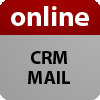
<style>
.page{position:relative;width:100px;height:100px}
.page>*{position:absolute;margin:0}
.t1{font:28.1px "MyriadPro-Bold";color:#ffffff}
.t2{font:18.7px/20px "MyriadPro-Bold";color:#000000}
</style>
<div class="page">
<p class="t1" style="left:11px;top:6px;width:78px;height:20px">online</p>
<p class="t1" style="left:11px;top:6px;width:78px;height:20px">online</p>
<p class="t2" style="left:28px;top:51px;width:42px;height:33px;text-align:center">CRM<br>MAIL</p>
</div>
